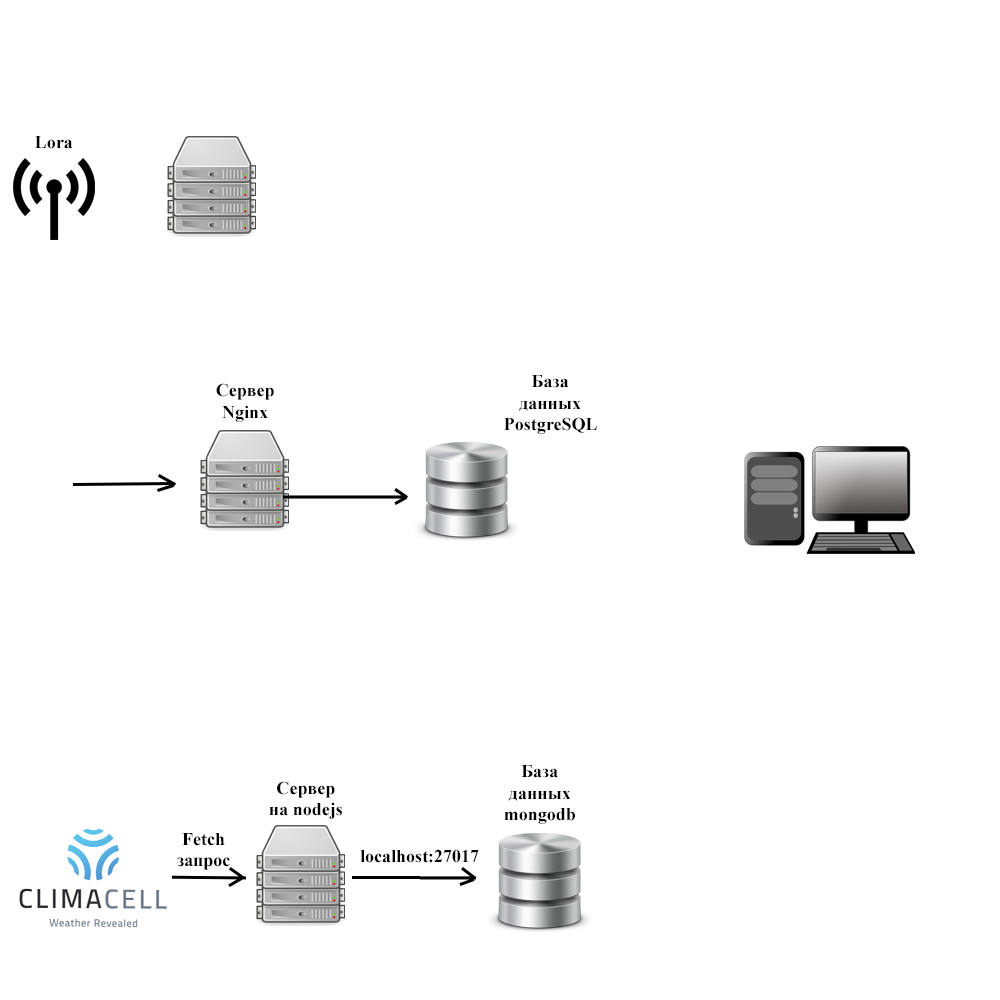
<style>
.page{position:relative;width:1000px;height:1000px;background:#ffffff}
.page>*{position:absolute;margin:0}
.t1{font:18px "TimesNewRomanPS-BoldMT";color:#000000}
</style>
<div class="page">
<p class="t1" style="left:35px;top:136px;width:38px;height:13px">Lora</p>
<p class="t1" style="left:504px;top:375px;width:93px;height:59px;text-align:center">База данных<br>PostgreSQL</p>
<p class="t1" style="left:216px;top:383px;width:58px;height:39px;text-align:center">Сервер Nginx</p>
<p class="t1" style="left:504px;top:765px;width:71px;height:59px;text-align:center">База данных mongodb</p>
<p class="t1" style="left:269px;top:781px;width:73px;height:38px;text-align:center">Сервер на nodejs</p>
<p class="t1" style="left:177px;top:833px;width:53px;height:37px;text-align:center">Fetch запрос</p>
<p class="t1" style="left:360px;top:849px;width:119px;height:14px">localhost:27017</p>
</div>
